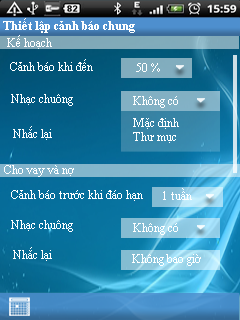
<style>
.page{position:relative;width:240px;height:320px}
.page>*{position:absolute;margin:0}
.t1{font:11.6px "TimesNewRomanPS-BoldMT";color:#ffffff}
.t2{font:11.6px "TimesNewRomanPSMT";color:#ffffff}
</style>
<div class="page">
<p class="t1" style="left:3px;top:18px;width:132px;height:15px">Thiết lập cảnh báo chung</p>
<p class="t2" style="left:7px;top:35px;width:45px;height:14px">Kế hoạch</p>
<p class="t2" style="left:10px;top:59px;width:83px;height:12px">Cảnh báo khi đến</p>
<p class="t2" style="left:136px;top:63px;width:24px;height:9px">50 %</p>
<p class="t2" style="left:11px;top:94px;width:62px;height:12px">Nhạc chuông</p>
<p class="t2" style="left:133px;top:96px;width:45px;height:12px">Không có</p>
<p class="t2" style="left:13px;top:126px;width:39px;height:14px">Nhắc lại</p>
<p class="t2" style="left:133px;top:118px;width:46px;height:25px">Mặc định<br>Thư mục</p>
<p class="t2" style="left:4px;top:165px;width:70px;height:12px">Cho vay và nợ</p>
<p class="t2" style="left:11px;top:190px;width:132px;height:11px">Cảnh báo trước khi đáo hạn</p>
<p class="t2" style="left:163px;top:188px;width:29px;height:12px">1 tuần</p>
<p class="t2" style="left:11px;top:220px;width:62px;height:12px">Nhạc chuông</p>
<p class="t2" style="left:133px;top:223px;width:45px;height:12px">Không có</p>
<p class="t2" style="left:13px;top:247px;width:39px;height:14px">Nhắc lại</p>
<p class="t2" style="left:132px;top:254px;width:69px;height:12px">Không bao giờ</p>
</div>
